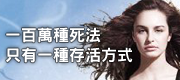
<style>
.page{position:relative;width:180px;height:80px}
.page>*{position:absolute;margin:0}
.t1{font:16px/20px "DFHeiStd-W9";color:#ffffff}
</style>
<div class="page">
<p class="t1" style="left:6px;top:27px;width:127px;height:36px">一百萬種死法<br>只有一種存活方式</p>
</div>
